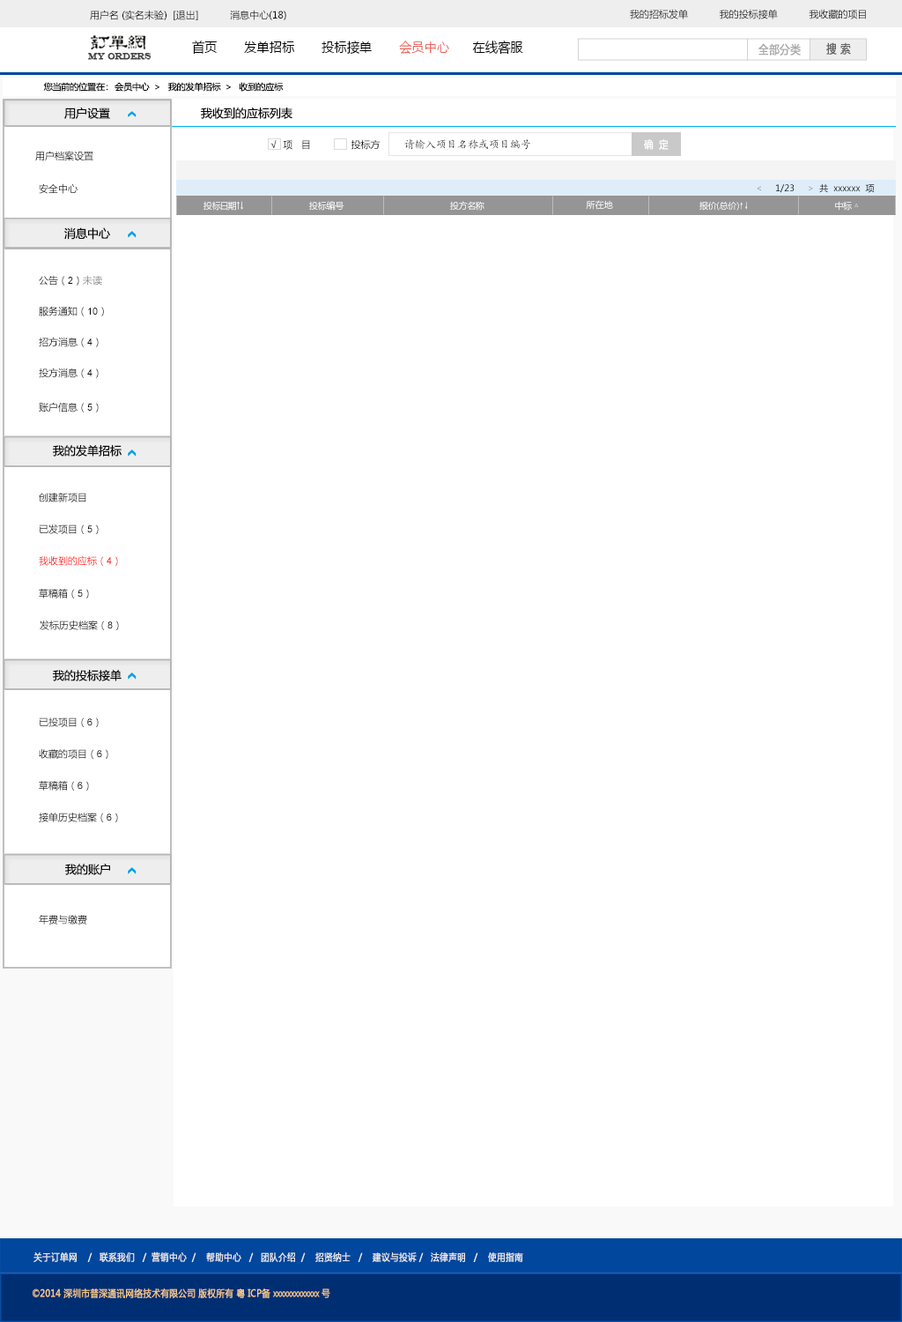
<style>
.page{position:relative;width:902px;height:1322px;background:#ffffff}
.page>*{position:absolute;margin:0}
.t1{font:9.7px "MicrosoftYaHei";color:#000000}
.t2{font:13.6px "MicrosoftYaHei";color:#000000;font-variant:small-caps;scale:0.94 1}
.t3{font:13.6px "MicrosoftYaHei";color:#ed6059;font-variant:small-caps;scale:0.94 1}
.t4{font:8.7px "EngraversMT";color:#434343;font-variant:small-caps;font-weight:bold;scale:0.86 1}
.t5{font:11.6px "MicrosoftYaHei";color:#aaaaaa;font-variant:small-caps;font-weight:bold;scale:0.86 1}
.t6{font:11.6px "MicrosoftYaHei";color:#626262;font-variant:small-caps;font-weight:bold;scale:0.86 1}
.t7{font:8.8px "MicrosoftYaHei";color:#060606}
.t8{font:11.5px "MicrosoftYaHei";color:#060606}
.t9{font:10.6px "KaiTi_GB2312"}
.t10{font:10.7px "MicrosoftYaHei";color:#ffffff;font-variant:small-caps;font-weight:bold;scale:0.86 1}
.t11{font:9.7px "MicrosoftYaHei";color:#060606}
.t12{font:9.7px "MicrosoftYaHei"}
.t13{font:8.8px "MicrosoftYaHei";color:#ffffff}
.t14{font:8.8px "SimSun";color:#ffffff}
.t15{font:9.7px "ArialMT";color:#060606}
.t16{font:9.7px "MicrosoftYaHei";color:#888584}
.t17{font:9.7px "ArialMT";color:#000000}
.t18{font:9.7px "MicrosoftYaHei";color:#ff0000}
.t19{font:9.7px "ArialMT";color:#ff0000}
.t20{font:9.7px "MicrosoftYaHei";color:#eeeeee;font-variant:small-caps;font-weight:bold;scale:0.86 1}
.t21{font:13.6px "STXihei";color:#eeeeee;font-variant:small-caps;font-weight:bold;scale:0.86 1}
.t22{font:9.7px "MicrosoftYaHei";color:#facd89;font-variant:small-caps;font-weight:bold;scale:0.87 1}
.t23{font:9.7px "MicrosoftYaHei";color:#eeeeee;font-variant:small-caps;font-weight:bold;scale:0.87 1}
</style>
<div class="page">
<p class="t1" style="left:90px;top:10px;width:196px;height:10px">用户名 (实名未验)  [退出]           消息中心(18)</p>
<p class="t1" style="left:630px;top:9px;width:236px;height:10px">我的招标发单           我的投标接单           我收藏的项目</p>
<p class="t2" style="left:192px;top:41px;width:331px;height:14px">首页       发单招标       投标接单       <span class="t3">会员中心</span>      在线客服</p>
<p class="t4" style="left:88px;top:53px;width:64px;height:7px">MY ORDERS</p>
<p class="t5" style="left:759px;top:43px;width:42px;height:13px">全部分类</p>
<p class="t6" style="left:826px;top:42px;width:25px;height:13px">搜 索</p>
<p class="t7" style="left:43px;top:82px;width:241px;height:10px">您当前的位置在：  会员中心  &gt;   我的发单招标  &gt;   收到的应标</p>
<p class="t8" style="left:64px;top:107px;width:46px;height:12px">用户设置</p>
<p class="t8" style="left:201px;top:107px;width:92px;height:12px">我收到的应标列表</p>
<p class="t1" style="left:270px;top:139px;width:111px;height:11px">√  项   目              投标方</p>
<p class="t9" style="left:404px;top:139px;width:126px;height:11px">请输入项目名称或项目编号</p>
<p class="t10" style="left:644px;top:139px;width:25px;height:11px">确  定</p>
<p class="t11" style="left:35px;top:151px;width:58px;height:10px">用户档案设置</p>
<p class="t12" style="left:39px;top:183px;width:39px;height:11px">安全中心</p>
<p class="t7" style="left:757px;top:184px;width:118px;height:9px">&lt;     1/23     &gt;  共  xxxxxx  项</p>
<p class="t13" style="left:204px;top:201px;width:40px;height:10px">投标日期↑↓</p>
<p class="t13" style="left:309px;top:201px;width:36px;height:10px">投标编号</p>
<p class="t13" style="left:450px;top:201px;width:35px;height:10px">投方名称</p>
<p class="t13" style="left:586px;top:200px;width:27px;height:10px">所在地</p>
<p class="t13" style="left:700px;top:201px;width:48px;height:10px">报价(总价)<span class="t14">↑↓</span></p>
<p class="t13" style="left:835px;top:201px;width:24px;height:10px">中标 △</p>
<p class="t8" style="left:64px;top:227px;width:46px;height:13px">消息中心</p>
<p class="t11" style="left:39px;top:275px;width:63px;height:10px">公告（<span class="t15">2</span>）<span class="t16">未读</span></p>
<p class="t11" style="left:39px;top:306px;width:65px;height:10px">服务通知（<span class="t15">10</span>）</p>
<p class="t11" style="left:39px;top:337px;width:60px;height:10px">招方消息（<span class="t15">4</span>）</p>
<p class="t11" style="left:39px;top:367px;width:60px;height:11px">投方消息（<span class="t15">4</span>）</p>
<p class="t11" style="left:39px;top:402px;width:60px;height:10px">账户信息（<span class="t15">5</span>）</p>
<p class="t8" style="left:53px;top:445px;width:69px;height:11px">我的发单招标</p>
<p class="t12" style="left:39px;top:493px;width:47px;height:9px">创建新项目</p>
<p class="t1" style="left:39px;top:524px;width:60px;height:10px">已发项目（<span class="t17">5</span>）</p>
<p class="t18" style="left:39px;top:556px;width:79px;height:10px">我收到的应标（<span class="t19">4</span>）</p>
<p class="t11" style="left:39px;top:589px;width:50px;height:9px">草稿箱（<span class="t15">5</span>）</p>
<p class="t11" style="left:40px;top:620px;width:79px;height:10px">发标历史档案（<span class="t15">8</span>）</p>
<p class="t8" style="left:53px;top:670px;width:69px;height:11px">我的投标接单</p>
<p class="t11" style="left:39px;top:717px;width:60px;height:10px">已投项目（<span class="t15">6</span>）</p>
<p class="t11" style="left:39px;top:749px;width:69px;height:10px">收藏的项目（<span class="t15">6</span>）</p>
<p class="t11" style="left:39px;top:781px;width:50px;height:9px">草稿箱（<span class="t15">6</span>）</p>
<p class="t11" style="left:39px;top:812px;width:79px;height:10px">接单历史档案（<span class="t15">6</span>）</p>
<p class="t8" style="left:65px;top:863px;width:45px;height:12px">我的账户</p>
<p class="t11" style="left:39px;top:915px;width:48px;height:9px">年费与缴费</p>
<p class="t20" style="left:33px;top:1251px;width:490px;height:11px"><span class="t21"><br><br></span>关于订单网    /   联系我们   /  营销中心  /    帮助中心   /   团队介绍  /    招贤纳士   /    建议与投诉 /   法律声明   /    使用指南</p>
<p class="t22" style="left:33px;top:1288px;width:297px;height:10px"><span class="t23"> </span>©2014 深圳市普深通讯网络技术有限公司 版权所有 粤 ICP备 xxxxxxxxxxxxx 号</p>
</div>
